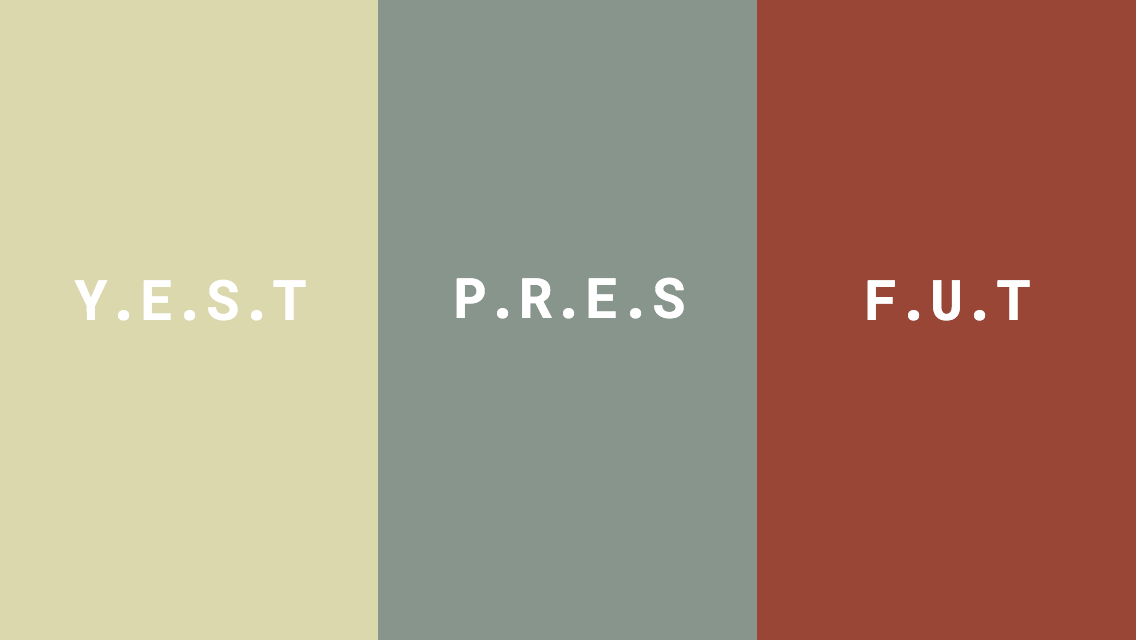
<style>
.page{position:relative;width:1136px;height:640px;background:#88958d}
.page>*{position:absolute;margin:0}
.t1{font:55.2px "RobotoMono-Bold";color:#ffffff}
</style>
<div class="page">
<p class="t1" style="left:74px;top:279px;width:232px;height:42px">Y.E.S.T</p>
<p class="t1" style="left:456px;top:277px;width:228px;height:42px">P.R.E.S</p>
<p class="t1" style="left:867px;top:280px;width:163px;height:41px">F.U.T</p>
</div>
